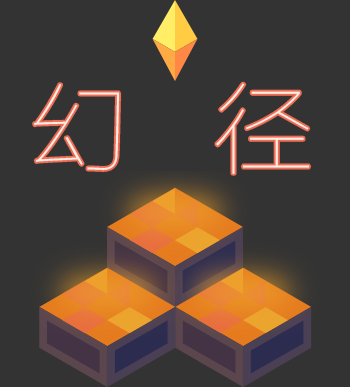
<style>
.page{position:relative;width:350px;height:387px;background:#333333}
.page>*{position:absolute;margin:0}
.t1{font:100px "FZLTCXHJW--GB1-0";color:#ffece3}
</style>
<div class="page">
<p class="t1" style="left:34px;top:83px;width:276px;height:91px">幻   径</p>
</div>
